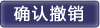
<style>
.page{position:relative;width:100px;height:28px}
.page>*{position:absolute;margin:0}
.t1{font:16px "MicrosoftYaHei";letter-spacing:0.1em;color:#ffffff;font-weight:bold}
</style>
<div class="page">
<p class="t1" style="left:14px;top:5px;width:70px;height:17px">确认撤销</p>
</div>
